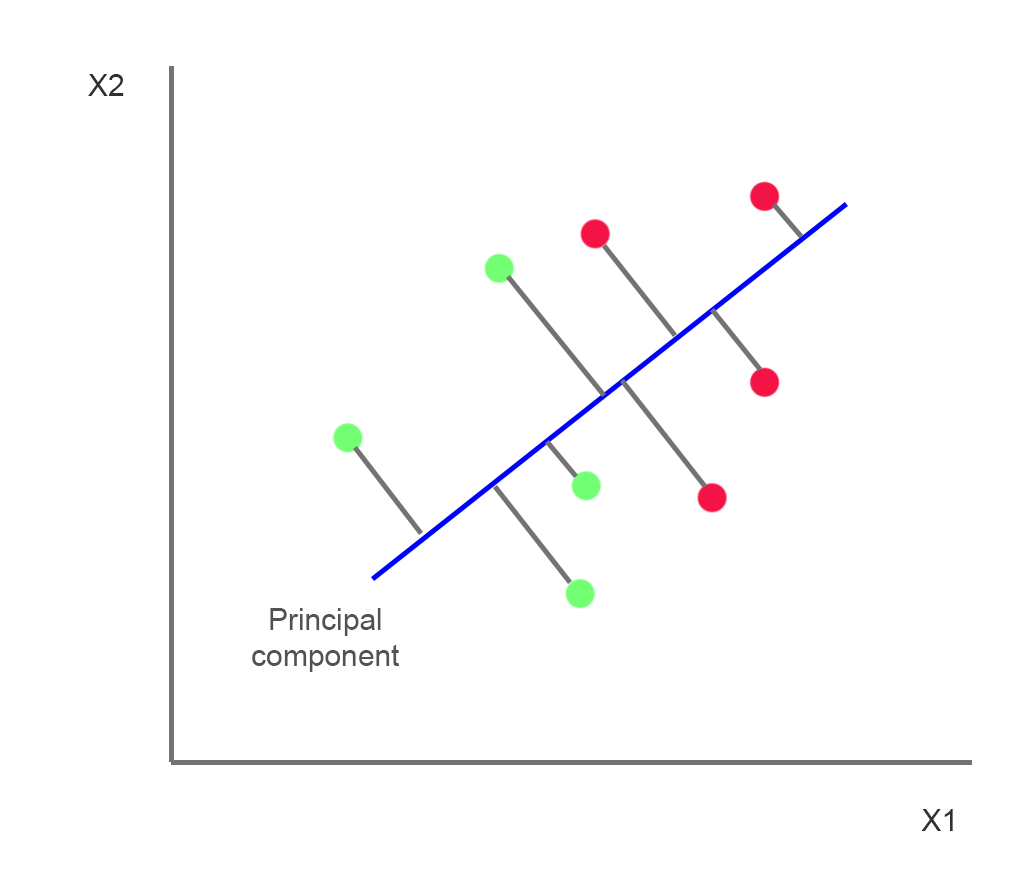
<style>
.page{position:relative;width:1024px;height:889px;background:#ffffff}
.page>*{position:absolute;margin:0}
.t1{font:30px "ArialMT";color:#303030}
.t2{font:30px "ArialMT";color:#525252}
</style>
<div class="page">
<p class="t1" style="left:88px;top:74px;width:36px;height:22px">X2</p>
<p class="t2" style="left:252px;top:608px;width:147px;height:64px;text-align:center">Principal<br>component</p>
<p class="t1" style="left:921px;top:809px;width:32px;height:22px">X1</p>
</div>
